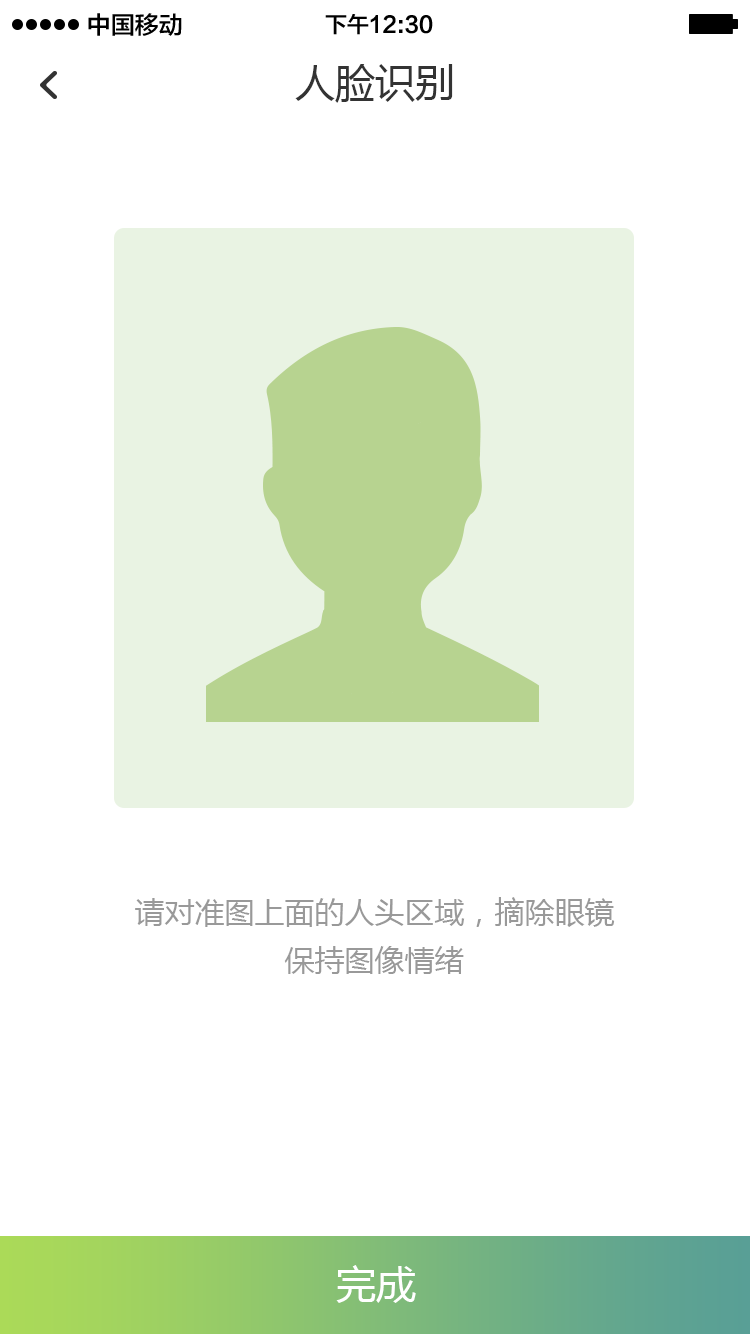
<style>
.page{position:relative;width:750px;height:1334px;background:#ffffff}
.page>*{position:absolute;margin:0}
.t1{font:24px "FZLTZHK--GBK1-0";color:#000000}
.t2{font:22px "FZLTZHK--GBK1-0";color:#000000}
.t3{font:40px "MicrosoftYaHei";color:#333333}
.t4{font:30px/48px "MicrosoftYaHei";color:#999999}
.t5{font:40px "MicrosoftYaHei";color:#ffffff}
</style>
<div class="page">
<p class="t1" style="left:88px;top:13px;width:94px;height:23px">中国移动</p>
<p class="t2" style="left:325px;top:14px;width:108px;height:21px">下午12:30</p>
<p class="t3" style="left:295px;top:64px;width:158px;height:39px">人脸识别</p>
<p class="t4" style="left:135px;top:897px;width:480px;height:77px;text-align:center">请对准图上面的人头区域，摘除眼镜<br>保持图像情绪</p>
<p class="t5" style="left:336px;top:1265px;width:80px;height:38px">完成</p>
</div>
